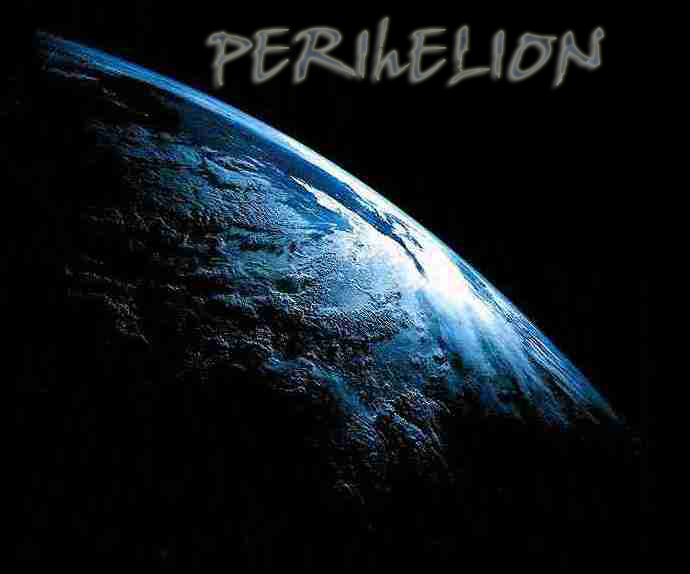
<style>
.page{position:relative;width:690px;height:574px;background:#000000}
.page>*{position:absolute;margin:0}
.t1{font:72px "JohnHandyLetPlain";color:#666b6c}
</style>
<div class="page">
<p class="t1" style="left:210px;top:17px;width:394px;height:69px">PERIhELION</p>
</div>
